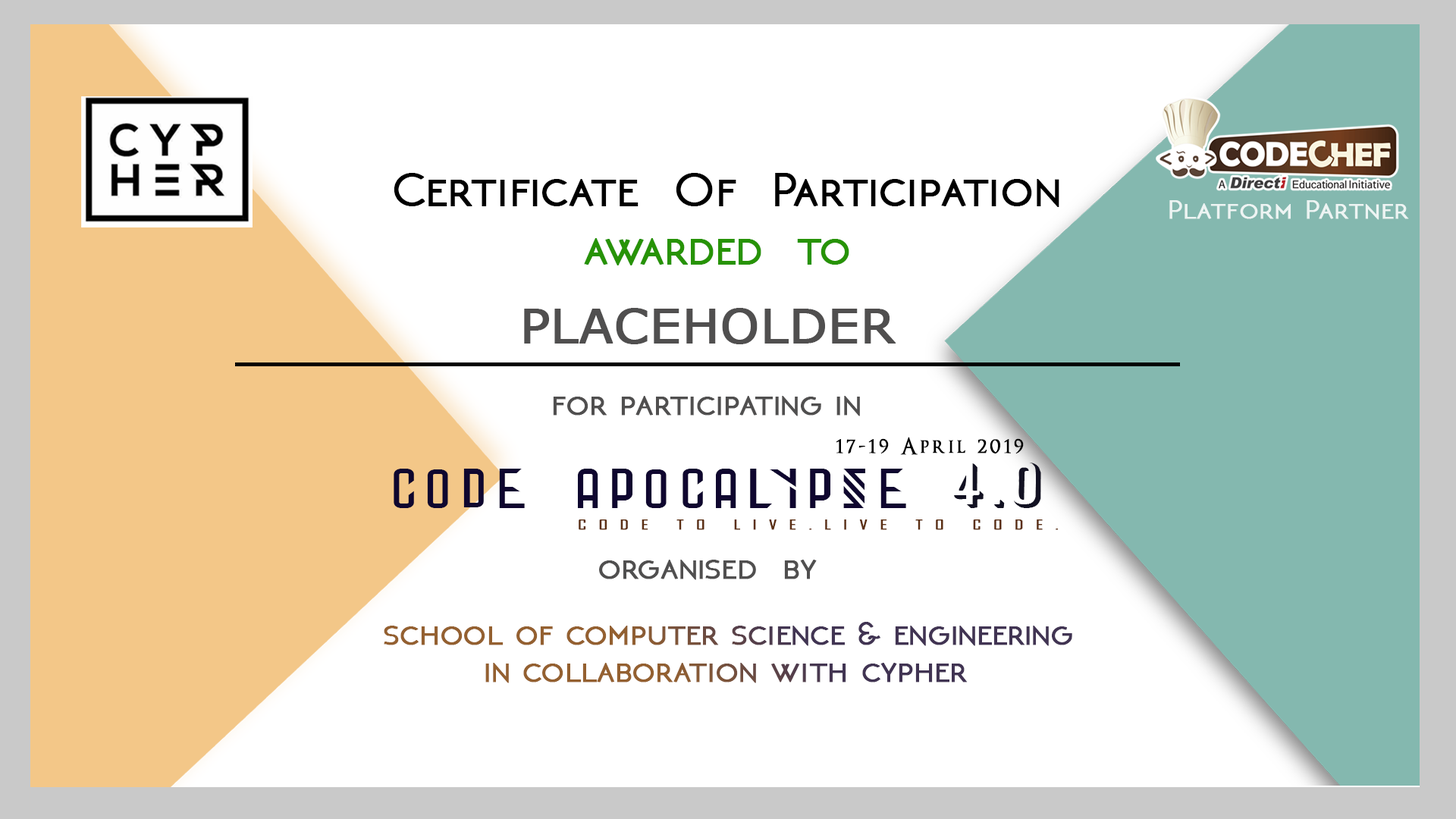
<style>
.page{position:relative;width:1456px;height:819px;background:#ffffff}
.page>*{position:absolute;margin:0}
.t1{font:49.5px "NEOTERIC-Bold";color:#000000;font-weight:bold;scale:1.04 1}
.t2{font:27.1px "NEOTERIC-Bold";letter-spacing:0.02em;color:#ffffff;font-weight:bold;scale:1.12 1}
.t3{font:47.2px "NEOTERIC-Bold";color:#279306;font-weight:bold;scale:1.04 1}
.t4{font:47.2px "Verdana";color:#504f4f;font-weight:bold;scale:1.04 1}
.t5{font:34.8px "NEOTERIC-Bold";color:#504f4f;font-weight:bold;scale:1.04 1}
.t6{font:22.6px "OptimusPrinceps";letter-spacing:0.12em;color:#000000;font-weight:bold}
.t7{font:56.3px "StoneWalls";letter-spacing:0.12em;color:#0f062f;scale:1.17 1}
.t8{font:56.3px "StoneWalls";letter-spacing:-0.12em;color:#0f062f;scale:1.17 1}
.t9{font:56.3px "Archer";letter-spacing:0.12em;color:#121122;scale:1.17 1}
.t10{font:13.1px "AgencyFB-Reg";letter-spacing:0.56em;color:#5c2f13;font-weight:bold;scale:1.58 1}
.t11{font:34.8px/37.3px "NEOTERIC-Bold";font-weight:bold;scale:1.04 1}
</style>
<div class="page">
<p class="t1" style="left:394px;top:173px;width:665px;height:34px">Certificate  Of  Participation</p>
<p class="t2" style="left:1169px;top:200px;width:240px;height:20px;opacity:0.83">Platform Partner</p>
<p class="t3" style="left:584px;top:238px;width:265px;height:27px">awarded  to</p>
<p class="t4" style="left:524px;top:308px;width:372px;height:36px">PLACEHOLDER</p>
<p class="t5" style="left:553px;top:396px;width:307px;height:20px">for participating in</p>
<p class="t6" style="left:836px;top:437px;width:188px;height:18px">17-19 April 2019</p>
<p class="t7" style="left:394px;top:463px;width:647px;height:45px">CODE APOCA<span class="t8">L</span>YPSE <span class="t9">4.0</span></p>
<p class="t10" style="left:579px;top:519px;width:479px;height:11px">CODE TO LIVE.LIVE TO CODE.</p>
<p class="t5" style="left:599px;top:560px;width:218px;height:20px">organised  by</p>
<p class="t11" style="left:384px;top:622px;width:688px;height:61px">school of computer science &amp; engineering <br>        in collaboration with cypher</p>
</div>
